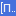
<style>
.page{position:relative;width:16px;height:16px;background:#4670dc}
.page>*{position:absolute;margin:0}
.t1{font:11px "SegoeUI";color:#f2f2f2}
</style>
<div class="page">
<p class="t1" style="left:3px;top:4px;width:8px;height:8px">П</p>
</div>
